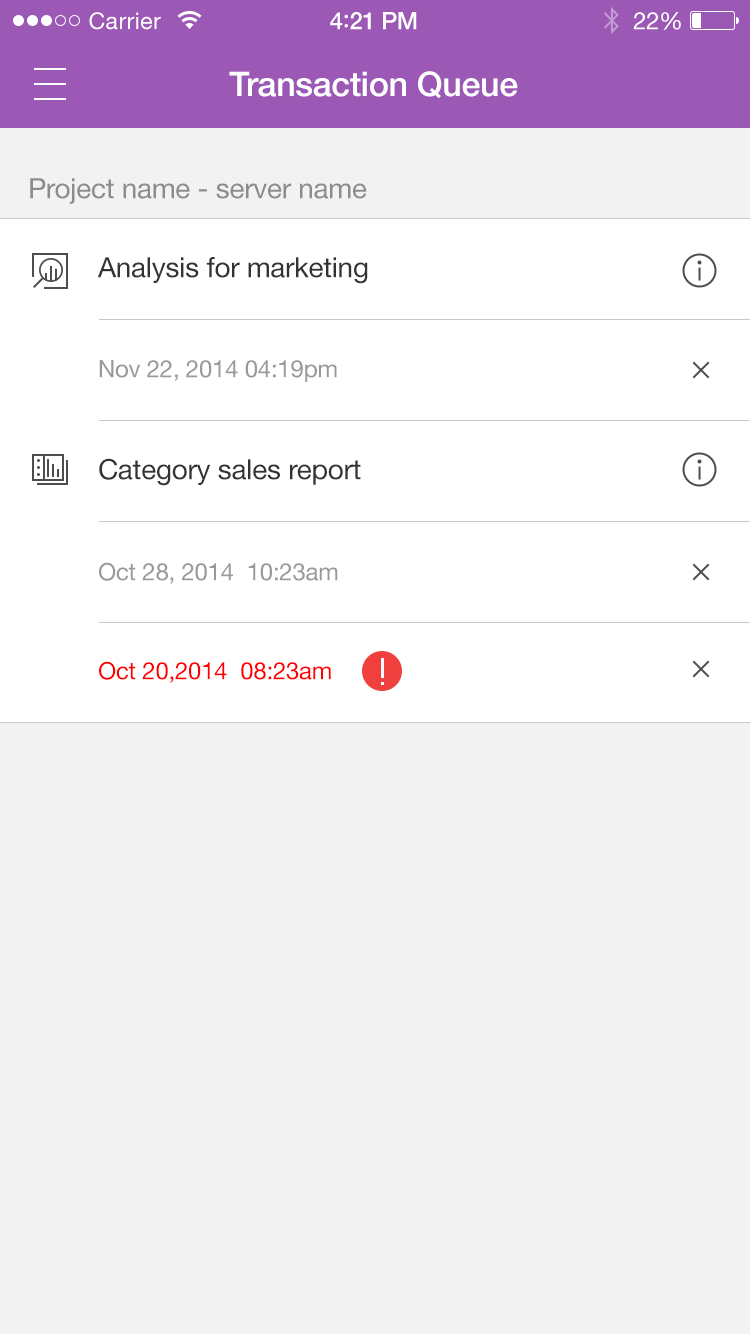
<style>
.page{position:relative;width:750px;height:1334px;background:#f2f2f2}
.page>*{position:absolute;margin:0}
.t1{font:23px "HelveticaNeue";letter-spacing:0.02em;color:#ffffff}
.t2{font:24px "HelveticaNeue-Medium";letter-spacing:-0.02em;color:#ffffff}
.t3{font:26px "Avenir-Medium";letter-spacing:-0.02em;color:#ffffff}
.t4{font:24px "HelveticaNeue";letter-spacing:-0.02em;color:#ffffff}
.t5{font:34px "HelveticaNeue-Medium";letter-spacing:-0.01em;color:#ffffff}
.t6{font:28px "HelveticaNeue";letter-spacing:-0.01em;color:#8c8c8c}
.t7{font:28px "HelveticaNeue";letter-spacing:-0.01em;color:#333333}
.t8{font:24px "HelveticaNeue";letter-spacing:-0.01em;color:#999999}
.t9{font:24px "HelveticaNeue";letter-spacing:-0.01em;color:#ff0000}
</style>
<div class="page">
<p class="t1" style="left:89px;top:12px;width:72px;height:18px">Carrier</p>
<p class="t2" style="left:330px;top:12px;width:87px;height:18px">4<span class="t3">:</span>21 PM</p>
<p class="t4" style="left:633px;top:12px;width:48px;height:18px">22%</p>
<p class="t5" style="left:229px;top:71px;width:289px;height:28px">Transaction Queue</p>
<p class="t6" style="left:30px;top:178px;width:337px;height:26px">Project name - server name</p>
<p class="t7" style="left:97px;top:257px;width:271px;height:27px">Analysis for marketing</p>
<p class="t8" style="left:99px;top:360px;width:238px;height:22px">Nov 22, 2014 04:19pm</p>
<p class="t7" style="left:99px;top:458px;width:262px;height:28px">Category sales report</p>
<p class="t8" style="left:99px;top:562px;width:239px;height:22px">Oct 28, 2014  10:23am</p>
<p class="t9" style="left:99px;top:661px;width:232px;height:22px">Oct 20,2014  08:23am</p>
</div>
